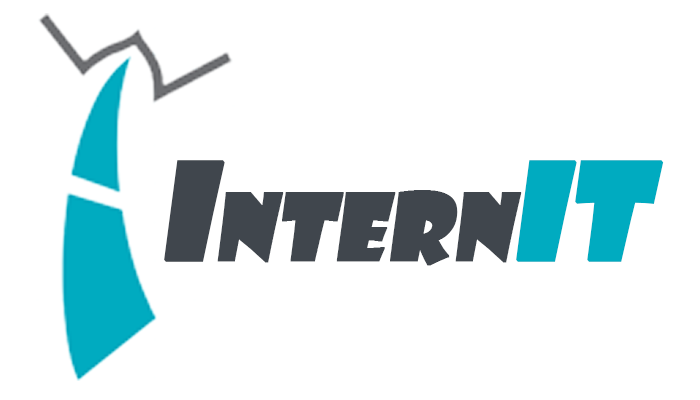
<style>
.page{position:relative;width:700px;height:400px;background:#ffffff}
.page>*{position:absolute;margin:0}
.t1{font:130px "ShowcardGothic-Reg";color:#40464d;font-variant:small-caps;font-weight:bold;font-style:italic}
.t2{font:130px "ShowcardGothic-Reg";color:#00abc0;font-variant:small-caps;font-weight:bold;font-style:italic}
</style>
<div class="page">
<p class="t1" style="left:164px;top:160px;width:500px;height:106px">Intern<span class="t2">IT</span></p>
</div>
